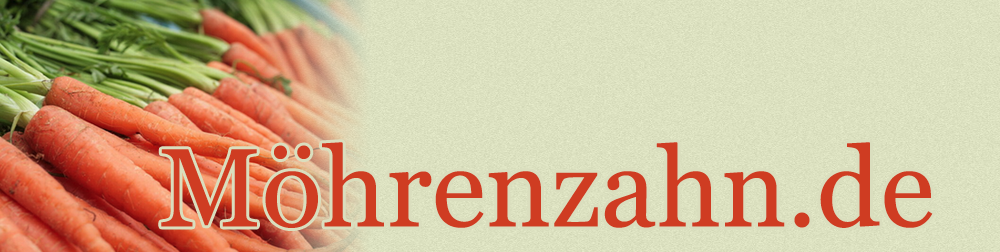
<style>
.page{position:relative;width:1000px;height:252px}
.page>*{position:absolute;margin:0}
.t1{font:111.1px "Georgia";color:#cf3c22}
</style>
<div class="page">
<p class="t1" style="left:161px;top:142px;width:772px;height:86px">Möhrenzahn.de</p>
</div>
